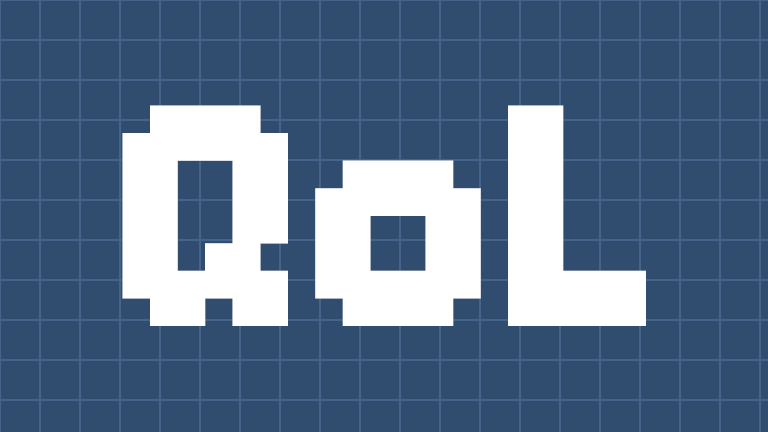
<style>
.page{position:relative;width:768px;height:432px;background:#304d70}
.page>*{position:absolute;margin:0}
.t1{font:303px "Endless-Boss-Battle";color:#ffffff}
</style>
<div class="page">
<p class="t1" style="left:122px;top:105px;width:524px;height:221px">QoL</p>
</div>
